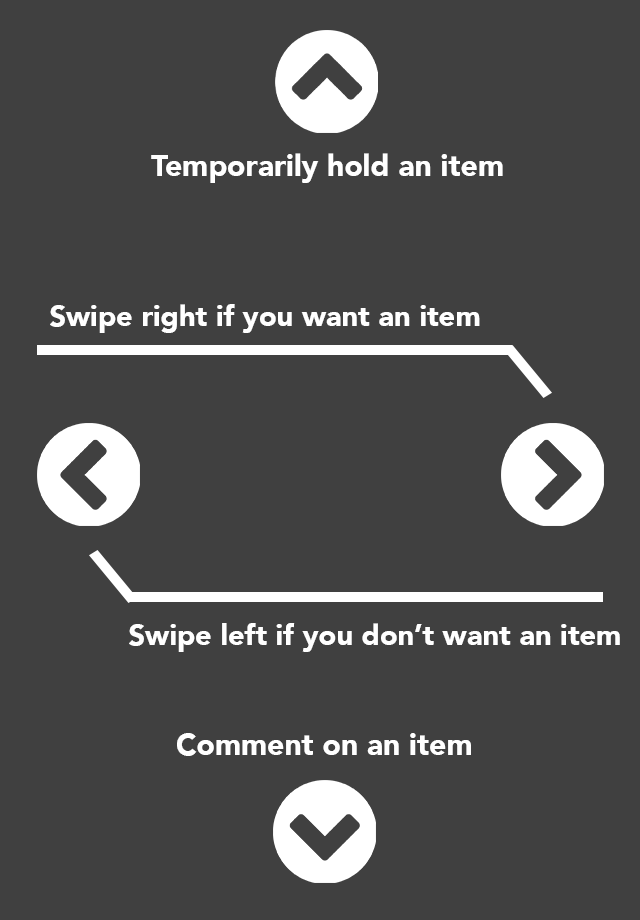
<style>
.page{position:relative;width:640px;height:920px;background:#404040}
.page>*{position:absolute;margin:0}
.t1{font:30px "Avenir-Black";color:#ffffff}
.t2{font:29px "Avenir-Black";color:#ffffff}
</style>
<div class="page">
<p class="t1" style="left:151px;top:153px;width:352px;height:30px">Temporarily hold an item</p>
<p class="t2" style="left:50px;top:304px;width:430px;height:29px">Swipe right if you want an item</p>
<p class="t2" style="left:129px;top:623px;width:491px;height:29px">Swipe left if you don’t want an item</p>
<p class="t1" style="left:177px;top:733px;width:294px;height:23px">Comment on an item</p>
</div>
